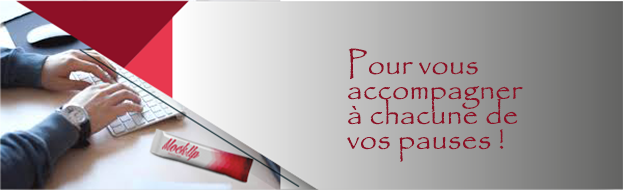
<style>
.page{position:relative;width:623px;height:190px}
.page>*{position:absolute;margin:0}
.t1{font:31.1px/24.9px "Papyrus-Regular";color:#8d1026}
</style>
<div class="page">
<p class="t1" style="left:347px;top:48px;width:176px;height:114px">Pour vous accompagner à chacune de vos pauses !</p>
</div>
